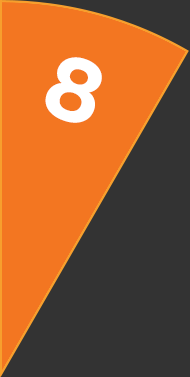
<style>
.page{position:relative;width:190px;height:377px;background:#333333}
.page>*{position:absolute;margin:0}
.t1{font:93.4px "FS-PF-BeauSans-Pro-Bold";letter-spacing:-0.025em;color:#ffffff;text-transform:uppercase}
</style>
<div class="page">
<p class="t1" style="left:45px;top:57px;width:57px;height:66px;rotate:19deg">8</p>
</div>
